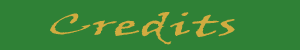
<style>
.page{position:relative;width:300px;height:50px;background:#2f8136}
.page>*{position:absolute;margin:0}
.t1{font:30px "VinerHandITC";color:#d2ab40;scale:2 1}
</style>
<div class="page">
<p class="t1" style="left:50px;top:12px;width:185px;height:33px">Credits</p>
</div>
